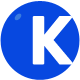
<style>
.page{position:relative;width:80px;height:80px;background:#0748e0}
.page>*{position:absolute;margin:0}
.t1{font:66.7px "Poppins-SemiBold";letter-spacing:0.1em;color:#ffffff;font-weight:bold}
</style>
<div class="page">
<p class="t1" style="left:32px;top:16px;width:41px;height:49px">K</p>
</div>
